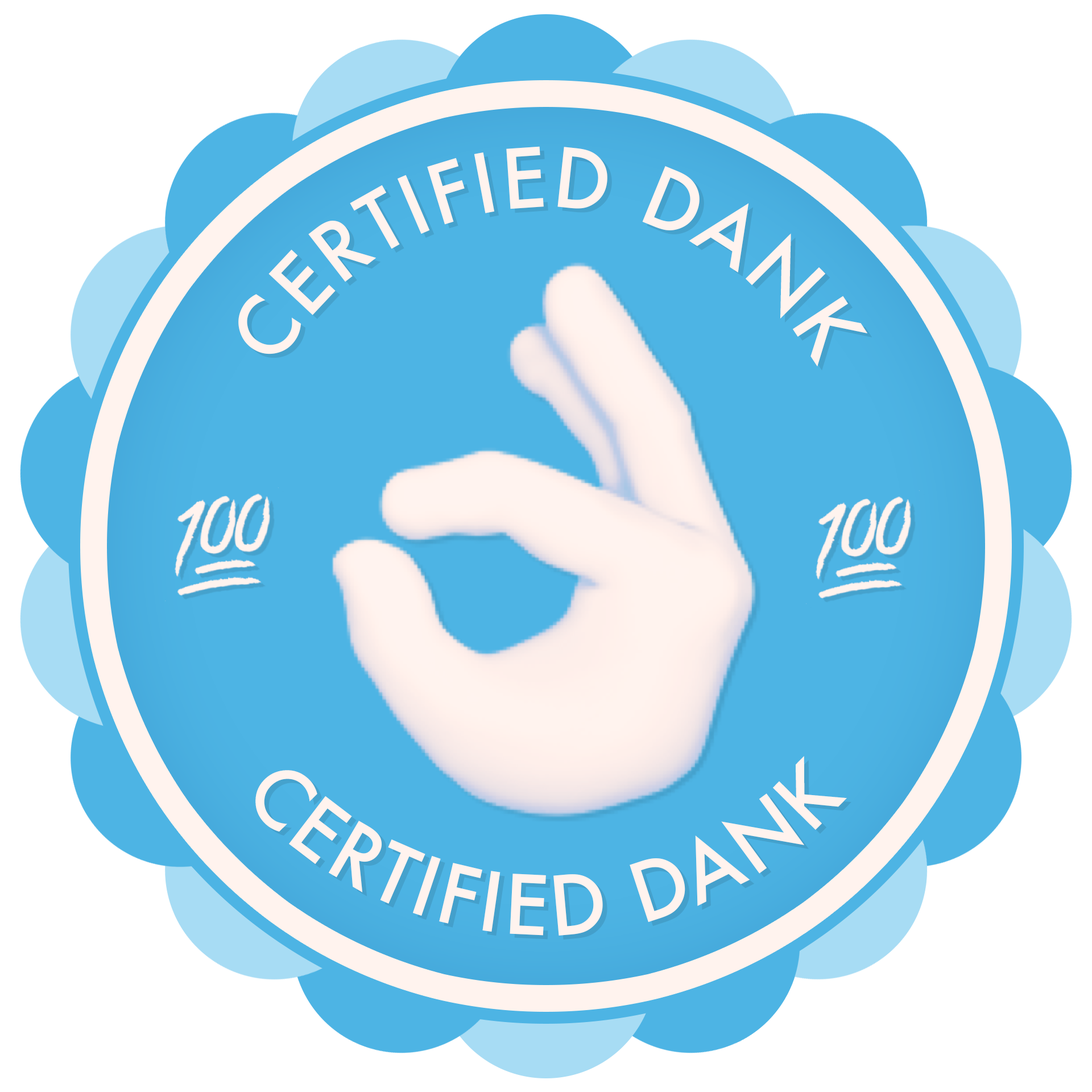
<style>
.page{position:relative;width:1092px;height:1092px;background:#ffffff}
.page>*{position:absolute;margin:0}
.t1{font:79.6px "Futura-Medium";letter-spacing:0.025em;color:#fff3ee}
.t2{font:79.6px "Futura-Medium";letter-spacing:0.05em;color:#fff3ee}
</style>
<div class="page">
<p class="t1" style="left:238px;top:146px;width:630px;height:221px;rotate:118deg">CERTIFIED DANK</p>
<p class="t2" style="left:255px;top:756px;width:592px;height:180px;text-align:center">CERTIFIED DANK</p>
</div>
